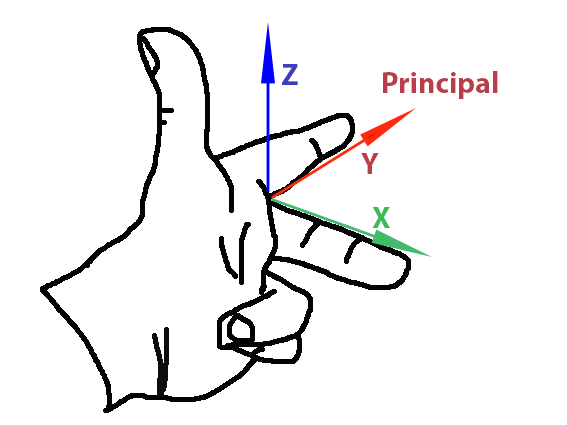
<style>
.page{position:relative;width:567px;height:425px;background:#ffffff}
.page>*{position:absolute;margin:0}
.t1{font:30px "MyriadPro-Bold";color:#3e3eb9}
.t2{font:30px "MyriadPro-Bold";color:#b93e4a}
.t3{font:30px "MyriadPro-Bold";color:#3eb958}
</style>
<div class="page">
<p class="t1" style="left:282px;top:64px;width:16px;height:21px">Z</p>
<p class="t2" style="left:383px;top:71px;width:115px;height:28px">Principal</p>
<p class="t2" style="left:361px;top:153px;width:18px;height:21px">Y</p>
<p class="t3" style="left:372px;top:207px;width:18px;height:21px">X</p>
</div>
